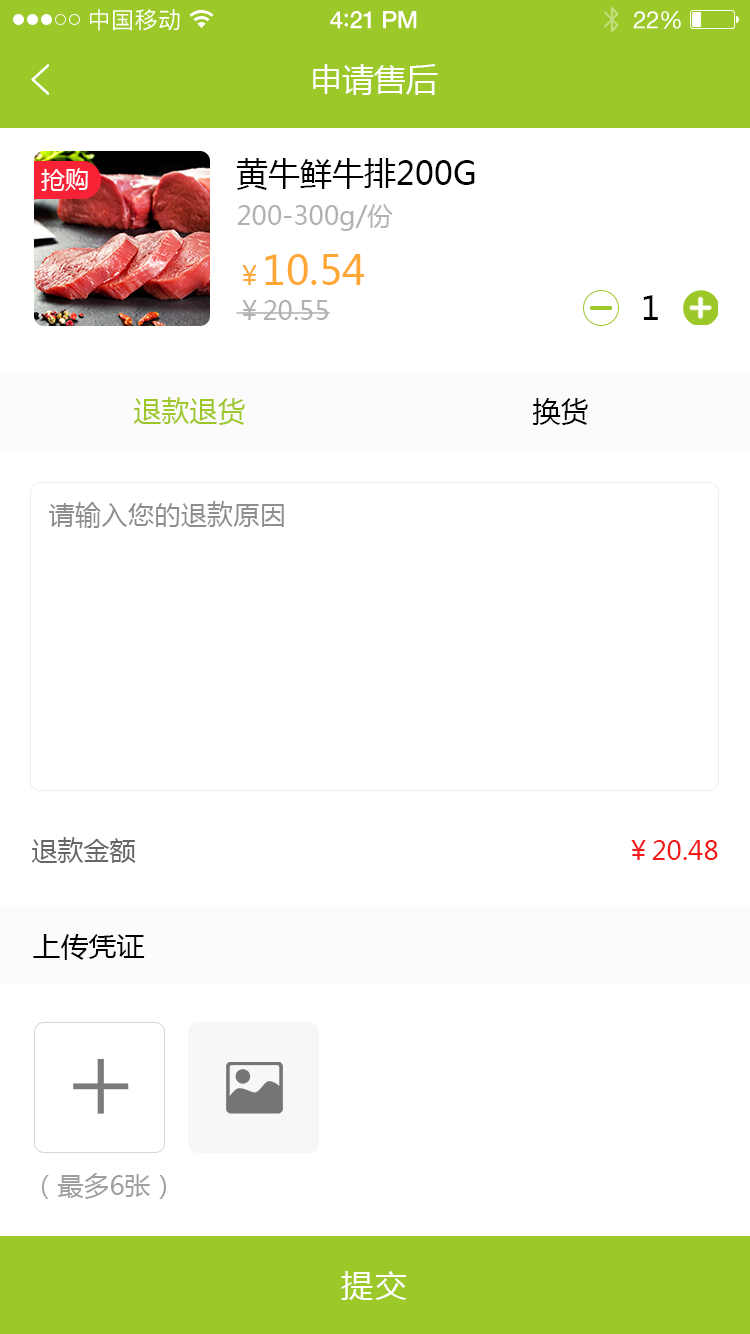
<style>
.page{position:relative;width:750px;height:1334px;background:#ffffff}
.page>*{position:absolute;margin:0}
.t1{font:23px "PingFangSC-Regular";letter-spacing:0.02em;color:#ffffff}
.t2{font:24px "HelveticaNeue-Medium";letter-spacing:-0.02em;color:#ffffff}
.t3{font:26px "Avenir-Medium";letter-spacing:-0.02em;color:#ffffff}
.t4{font:24px "HelveticaNeue";letter-spacing:-0.02em;color:#ffffff}
.t5{font:32px "MicrosoftYaHei";color:#ffffff;text-transform:uppercase}
.t6{font:32px "MicrosoftYaHei";color:#000000;text-transform:uppercase}
.t7{font:24px "MicrosoftYaHei";color:#ffffff;text-transform:uppercase}
.t8{font:26px "MicrosoftYaHei";color:#b1b1b1}
.t9{font:40px "MicrosoftYaHei";color:#ffa734}
.t10{font:26px "MicrosoftYaHei";color:#ffa734}
.t11{font:32px "MicrosoftYaHei";letter-spacing:0.08em;color:#000000;text-transform:uppercase}
.t12{font:28px "MicrosoftYaHei";color:#9cc829;text-transform:uppercase}
.t13{font:28px "MicrosoftYaHei";color:#000000;text-transform:uppercase}
.t14{font:26.4px "MicrosoftYaHei";color:#8e8e8e;text-transform:uppercase}
.t15{font:26px "MicrosoftYaHei";color:#666666;text-transform:uppercase}
.t16{font:26px "MicrosoftYaHei";color:#f51a1a;text-transform:uppercase}
.t17{font:106.2px "FZLTXHK--GBK1-0";color:#7b7b7b;text-transform:uppercase}
.t18{font:26px "MicrosoftYaHei";color:#9f9f9f;text-transform:uppercase}
.t19{font:32px "MicrosoftYaHei";letter-spacing:0.06em;color:#ffffff;text-transform:uppercase}
</style>
<div class="page">
<p class="t1" style="left:90px;top:9px;width:90px;height:22px">中国移动</p>
<p class="t2" style="left:330px;top:11px;width:87px;height:18px">4<span class="t3">:</span>21 PM</p>
<p class="t4" style="left:633px;top:11px;width:48px;height:18px">22%</p>
<p class="t5" style="left:313px;top:64px;width:125px;height:31px">申请售后</p>
<p class="t6" style="left:236px;top:158px;width:239px;height:32px">黄牛鲜牛排200g</p>
<p class="t7" style="left:41px;top:168px;width:47px;height:23px">抢购</p>
<p class="t8" style="left:237px;top:204px;width:156px;height:27px">200-300g/份</p>
<p class="t9" style="left:242px;top:254px;width:122px;height:31px"><span class="t10">￥</span>10.54</p>
<p class="t8" style="left:236px;top:300px;width:94px;height:20px">￥20.55</p>
<p class="t11" style="left:643px;top:295px;width:15px;height:25px">1</p>
<p class="t12" style="left:134px;top:397px;width:111px;height:28px">退款退货</p>
<p class="t13" style="left:533px;top:398px;width:55px;height:27px">换货</p>
<p class="t14" style="left:49px;top:501px;width:235px;height:27px">请输入您的退款原因</p>
<p class="t15" style="left:32px;top:837px;width:104px;height:26px">退款金额</p>
<p class="t16" style="left:631px;top:840px;width:87px;height:20px">￥20.48</p>
<p class="t13" style="left:33px;top:934px;width:112px;height:26px">上传凭证</p>
<p class="t17" style="left:73px;top:1058px;width:56px;height:56px">+</p>
<p class="t18" style="left:42px;top:1173px;width:124px;height:26px">（最多6张）</p>
<p class="t19" style="left:341px;top:1271px;width:66px;height:29px">提交</p>
</div>
